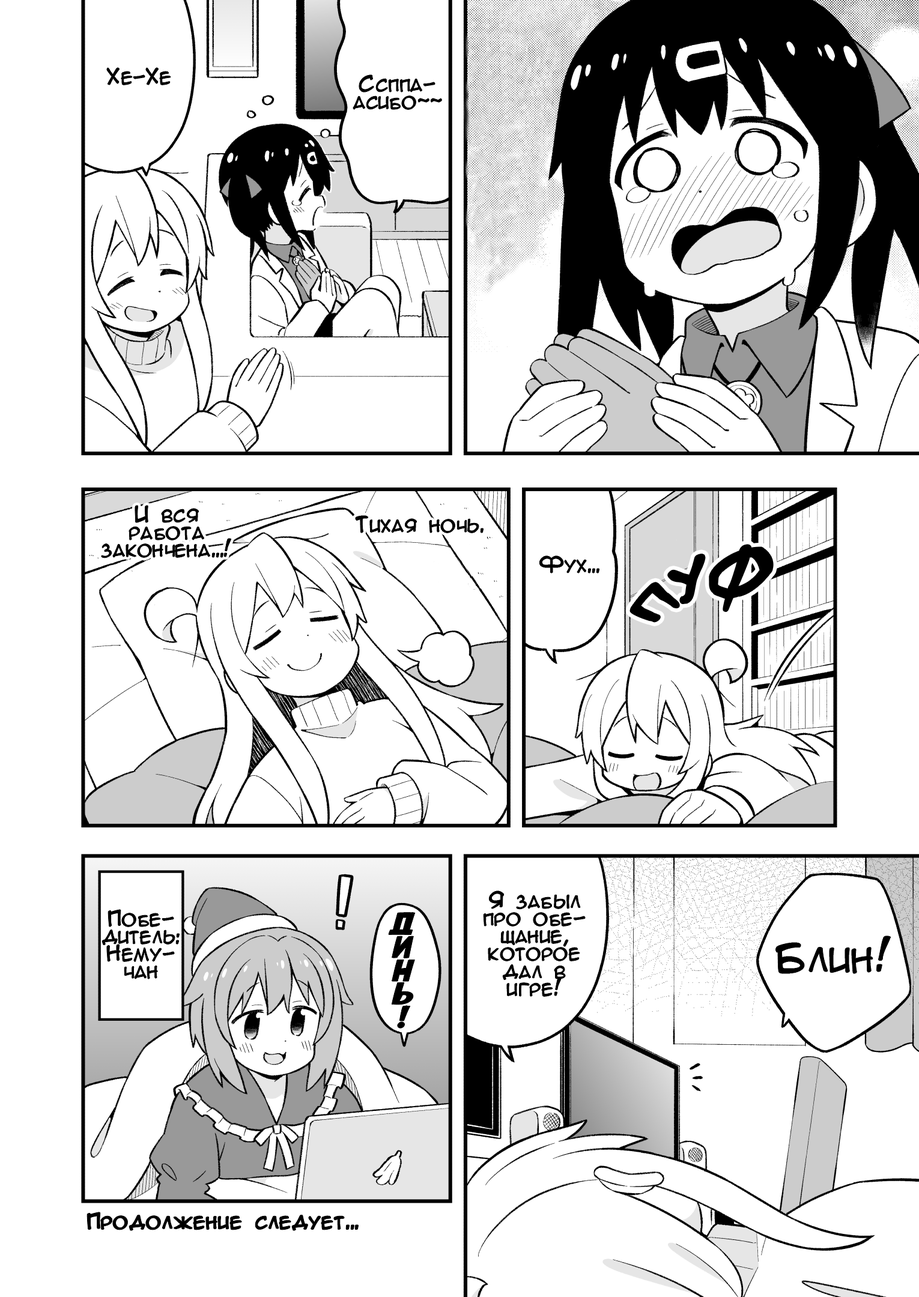
<style>
.page{position:relative;width:919px;height:1297px;background:#ffffff}
.page>*{position:absolute;margin:0}
.t1{font:20px "AnimeAcev3";color:#000000}
.t2{font:20px/17.5px "AnimeAcev3";color:#000000}
.t3{font:50.1px "SuperWebcomicBros.Rusbyyakustick";color:#000000}
.t4{font:30px/23.3px "AvengeanceMArusbyaLiNcE";color:#000000}
.t5{font:40px "AnimeAcev3";color:#000000}
.t6{font:20px "AnimeAcev3";color:#000000;font-weight:bold}
</style>
<div class="page">
<p class="t1" style="left:107px;top:68px;width:64px;height:17px">Хе-Хе</p>
<p class="t2" style="left:353px;top:75px;width:89px;height:35px;text-align:center">Ссппа-<br>асибо~~</p>
<p class="t2" style="left:102px;top:506px;width:129px;height:52px;text-align:center">И вся<br>работа<br>закончена...!</p>
<p class="t1" style="left:356px;top:516px;width:128px;height:17px">Тихая ночь.</p>
<p class="t3" style="left:631px;top:545px;width:141px;height:76px;rotate:-17deg">ПУФ</p>
<p class="t1" style="left:539px;top:556px;width:60px;height:17px">Фух...</p>
<p class="t2" style="left:484px;top:891px;width:101px;height:106px;text-align:center">Я забыл<br>про обе-<br>щание,<br>которое<br>дал в<br>игре!</p>
<p class="t2" style="left:102px;top:910px;width:78px;height:69px;text-align:center">Побе-<br>дитель:<br>Нему-<br>чан</p>
<p class="t4" style="left:389px;top:912px;width:26px;height:116px;text-align:center">Д<br>и<br>н<br>ь<br>!</p>
<p class="t5" style="left:775px;top:936px;width:116px;height:38px">Блин!</p>
<p class="t6" style="left:87px;top:1213px;width:272px;height:18px">Продолжение следует...</p>
</div>
